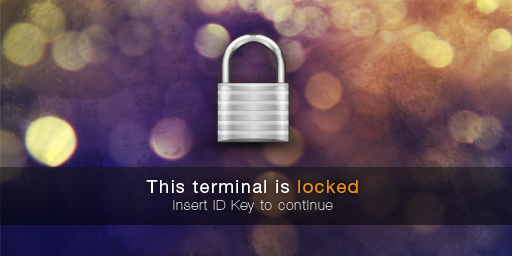
<style>
.page{position:relative;width:512px;height:256px}
.page>*{position:absolute;margin:0}
.t1{font:14px "HelveticaNeueLTPro-UltLt";letter-spacing:0.075em;color:#ffffff}
.t2{font:18.2px "HelveticaNeueLTPro-Roman";letter-spacing:0.075em;color:#ffffff}
.t3{font:18.2px "HelveticaNeueLTPro-Roman";letter-spacing:0.075em;color:#ed9017}
</style>
<div class="page">
<p class="t1" style="left:146px;top:180px;width:212px;height:33px;text-align:center"><span class="t2">This terminal is </span><span class="t3">locked<br></span>insert ID Key to continue</p>
</div>
